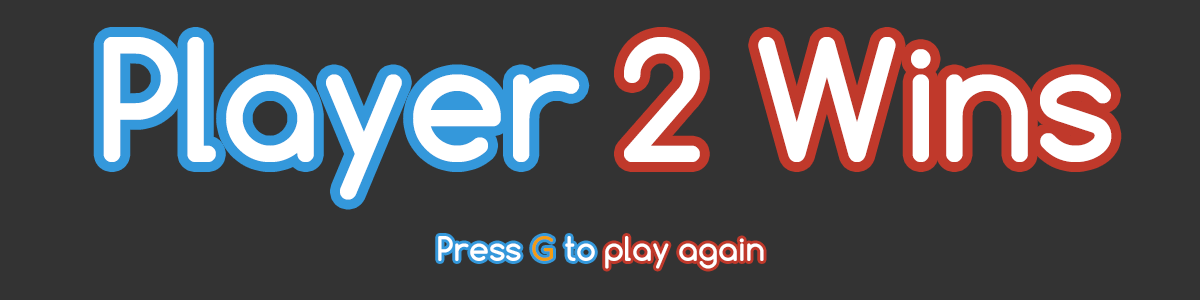
<style>
.page{position:relative;width:1200px;height:300px;background:#333333}
.page>*{position:absolute;margin:0}
.t1{font:160px "Comfortaa-Bold";color:#ffffff}
.t2{font:32px "Comfortaa-Bold";color:#ffffff}
.t3{font:32px "Comfortaa-Bold";color:#f39c12}
</style>
<div class="page">
<p class="t1" style="left:103px;top:37px;width:477px;height:163px">Player</p>
<p class="t1" style="left:624px;top:37px;width:488px;height:125px">2 Wins</p>
<p class="t2" style="left:438px;top:236px;width:157px;height:25px">Press <span class="t3">G</span> to</p>
<p class="t2" style="left:605px;top:236px;width:159px;height:33px">play again</p>
</div>
